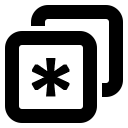
<style>
.page{position:relative;width:128px;height:128px;background:#ffffff}
.page>*{position:absolute;margin:0}
.t1{font:100px "Cambria";letter-spacing:0.2em;color:#000000;font-weight:bold}
</style>
<div class="page">
<p class="t1" style="left:31px;top:58px;width:39px;height:39px">*</p>
</div>
